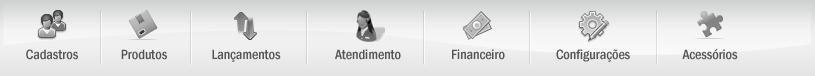
<style>
.page{position:relative;width:815px;height:76px}
.page>*{position:absolute;margin:0}
.t1{font:14px "FranklinGothic-MediumCond";color:#555555}
</style>
<div class="page">
<p class="t1" style="left:26px;top:49px;width:52px;height:11px">Cadastros</p>
<p class="t1" style="left:121px;top:49px;width:46px;height:11px">Produtos</p>
<p class="t1" style="left:212px;top:49px;width:69px;height:13px">Lançamentos</p>
<p class="t1" style="left:335px;top:49px;width:66px;height:11px">Atendimento</p>
<p class="t1" style="left:452px;top:49px;width:53px;height:11px">Financeiro</p>
<p class="t1" style="left:556px;top:49px;width:74px;height:13px">Configurações</p>
<p class="t1" style="left:682px;top:48px;width:56px;height:12px">Acessórios</p>
</div>
